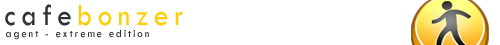
<style>
.page{position:relative;width:500px;height:45px;background:#ffffff}
.page>*{position:absolute;margin:0}
.t1{font:31.5px "TwCenMT-Regular";letter-spacing:0.2em;color:#ffcd03;scale:0.9 1}
.t2{font:31.5px "TwCenMT-Regular";letter-spacing:0.2em;color:#323232;scale:0.9 1}
.t3{font:11.6px "TwCenMT-Regular";letter-spacing:0.2em;color:#323232;scale:0.9 1}
</style>
<div class="page">
<p class="t1" style="left:5px;top:4px;width:178px;height:22px"><span class="t2">cafe</span>bonzer</p>
<p class="t3" style="left:6px;top:29px;width:143px;height:11px">agent - extreme edition</p>
</div>
